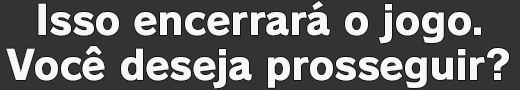
<style>
.page{position:relative;width:520px;height:90px;background:#333333}
.page>*{position:absolute;margin:0}
.t1{font:40px "RodinPro-EB";letter-spacing:-0.017em;color:#f9f7f6}
</style>
<div class="page">
<p class="t1" style="left:38px;top:1px;width:443px;height:43px">Isso encerrará o jogo.</p>
<p class="t1" style="left:6px;top:46px;width:503px;height:43px">Você deseja prosseguir?</p>
</div>
